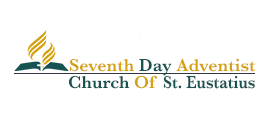
<style>
.page{position:relative;width:268px;height:117px;background:#ffffff}
.page>*{position:absolute;margin:0}
.t1{font:18px "Baskerville-SemiBold";color:#d5a10f}
.t2{font:18px "Baskerville-SemiBold";color:#175351}
.t3{font:18px "Baskerville-SemiBold";color:#175351;scale:0.88 1}
</style>
<div class="page">
<p class="t1" style="left:70px;top:58px;width:186px;height:18px">Seventh <span class="t2">Day </span>Adventist</p>
<p class="t2" style="left:69px;top:75px;width:61px;height:14px">Church</p>
<p class="t1" style="left:134px;top:75px;width:23px;height:14px">Of</p>
<p class="t3" style="left:163px;top:75px;width:92px;height:14px">St. Eustatius</p>
</div>
